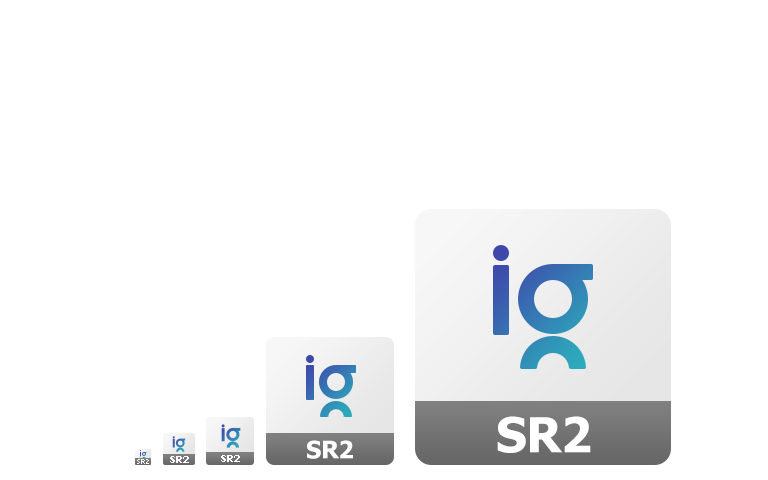
<style>
.page{position:relative;width:768px;height:480px;background:#ffffff}
.page>*{position:absolute;margin:0}
.t1{font:48px "Tahoma-Bold";color:#ffffff}
.t2{font:24px "Tahoma-Bold";color:#ffffff}
.t3{font:10px "Tahoma-Bold";color:#ffffff}
</style>
<div class="page">
<p class="t1" style="left:497px;top:416px;width:94px;height:37px">SR2</p>
<p class="t2" style="left:307px;top:440px;width:46px;height:19px">SR2</p>
<p class="t3" style="left:170px;top:456px;width:19px;height:7px">SR2</p>
<p class="t3" style="left:221px;top:455px;width:19px;height:7px">SR2</p>
</div>
